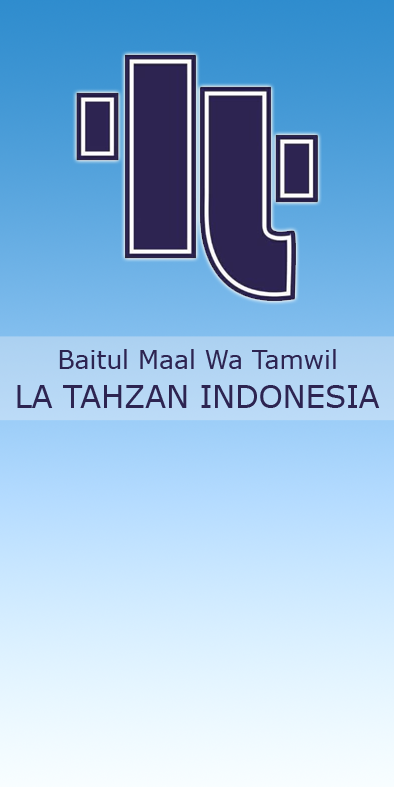
<style>
.page{position:relative;width:394px;height:787px}
.page>*{position:absolute;margin:0}
.t1{font:25px "Verdana";color:#2d2451}
.t2{font:30.6px "Verdana";color:#2d2451}
</style>
<div class="page">
<p class="t1" style="left:59px;top:349px;width:277px;height:20px">Baitul Maal Wa Tamwil</p>
<p class="t2" style="left:17px;top:385px;width:363px;height:23px">LA TAHZAN INDONESIA</p>
</div>
